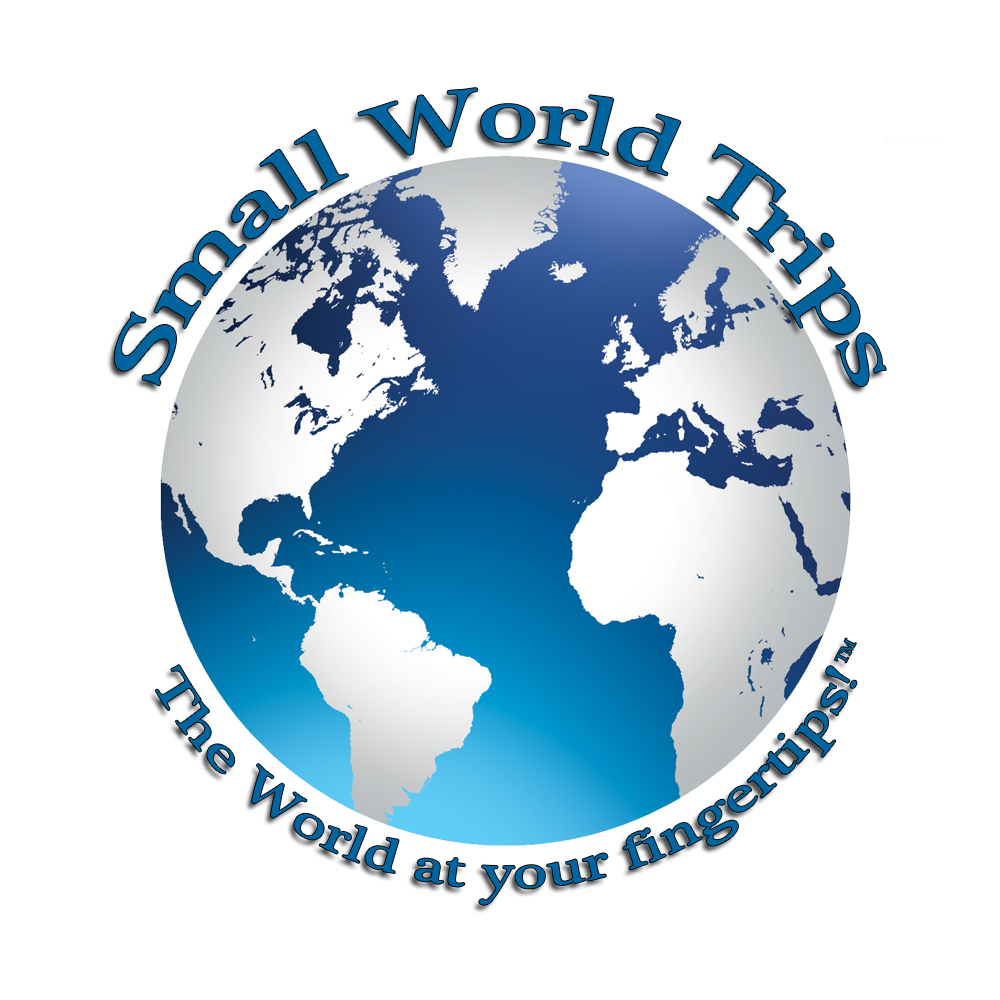
<style>
.page{position:relative;width:1000px;height:1000px;background:#ffffff}
.page>*{position:absolute;margin:0}
.t1{font:80px "PlantagenetCherokee";color:#00649f}
.t2{font:16.7px "PlantagenetCherokee";color:#00649f}
.t3{font:50px "PlantagenetCherokee";color:#00649f}
</style>
<div class="page">
<p class="t1" style="left:114px;top:88px;width:772px;height:299px">Small World Trips</p>
<p class="t2" style="left:835px;top:638px;width:21px;height:25px;rotate:-63deg">TM</p>
<p class="t3" style="left:155px;top:665px;width:702px;height:240px">The World at your fingertips!</p>
</div>
